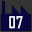
<style>
.page{position:relative;width:32px;height:32px;background:#07063f}
.page>*{position:absolute;margin:0}
.t1{font:16px "AgencyFB-Bold";color:#ececec}
</style>
<div class="page">
<p class="t1" style="left:9px;top:16px;width:14px;height:13px">07</p>
</div>
